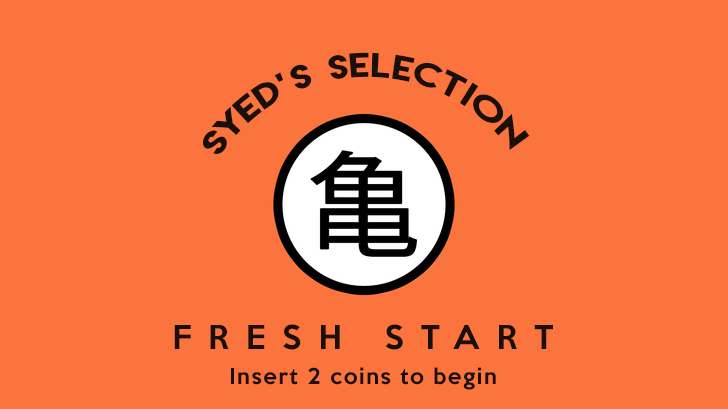
<style>
.page{position:relative;width:728px;height:409px;background:#fb743d}
.page>*{position:absolute;margin:0}
.t1{font:30px "LemonMilk";letter-spacing:0.08em;color:#1a0f0b}
.t2{font:30px "KeepCalm-Medium";letter-spacing:0.56em;color:#1a0f0b}
.t3{font:20px "KeepCalm-Medium";letter-spacing:0.08em;color:#1a0f0b}
</style>
<div class="page">
<p class="t1" style="left:202px;top:52px;width:328px;height:103px;rotate:-1deg">SYED’S Selection</p>
<p class="t2" style="left:174px;top:324px;width:379px;height:26px">FRESH START</p>
<p class="t3" style="left:231px;top:367px;width:265px;height:23px">Insert 2 coins to begin</p>
</div>
